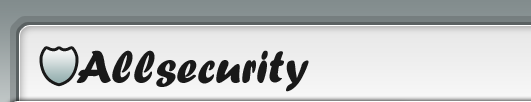
<style>
.page{position:relative;width:531px;height:102px}
.page>*{position:absolute;margin:0}
.t1{font:48px "ForteMT";color:#191919}
</style>
<div class="page">
<p class="t1" style="left:76px;top:50px;width:233px;height:42px">Allsecurity</p>
</div>
